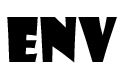
<style>
.page{position:relative;width:126px;height:77px;background:#ffffff}
.page>*{position:absolute;margin:0}
.t1{font:60px "ShowcardGothic-Reg";color:#000000}
</style>
<div class="page">
<p class="t1" style="left:7px;top:17px;width:110px;height:46px">Env</p>
</div>
